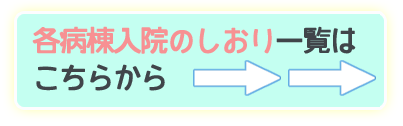
<style>
.page{position:relative;width:403px;height:126px;background:#c4fff1}
.page>*{position:absolute;margin:0}
.t1{font:29.2px/36.8px "JNR-SB-FontOTF";letter-spacing:-0.1em;color:#f79193;font-weight:bold}
.t2{font:29.2px/36.8px "JNR-SB-FontOTF";letter-spacing:-0.1em;color:#40454a;font-weight:bold}
</style>
<div class="page">
<p class="t1" style="left:32px;top:26px;width:324px;height:65px">各病棟入院のしおり<span class="t2">一覧は<br>こちらから</span></p>
</div>
